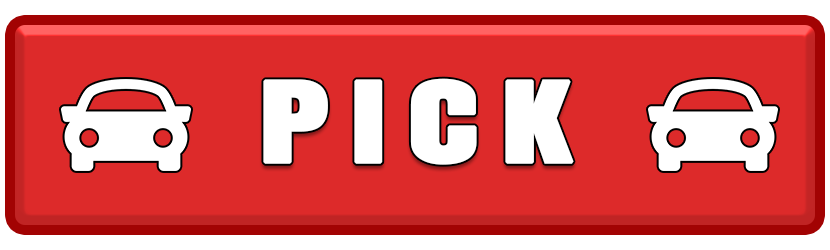
<style>
.page{position:relative;width:830px;height:250px;background:#dd2a2a}
.page>*{position:absolute;margin:0}
.t1{font:104.2px "Anton";letter-spacing:0.125em;color:#ffffff;font-weight:bold;scale:1.4 1}
</style>
<div class="page">
<p class="t1" style="left:263px;top:78px;width:311px;height:87px">PICK</p>
</div>
